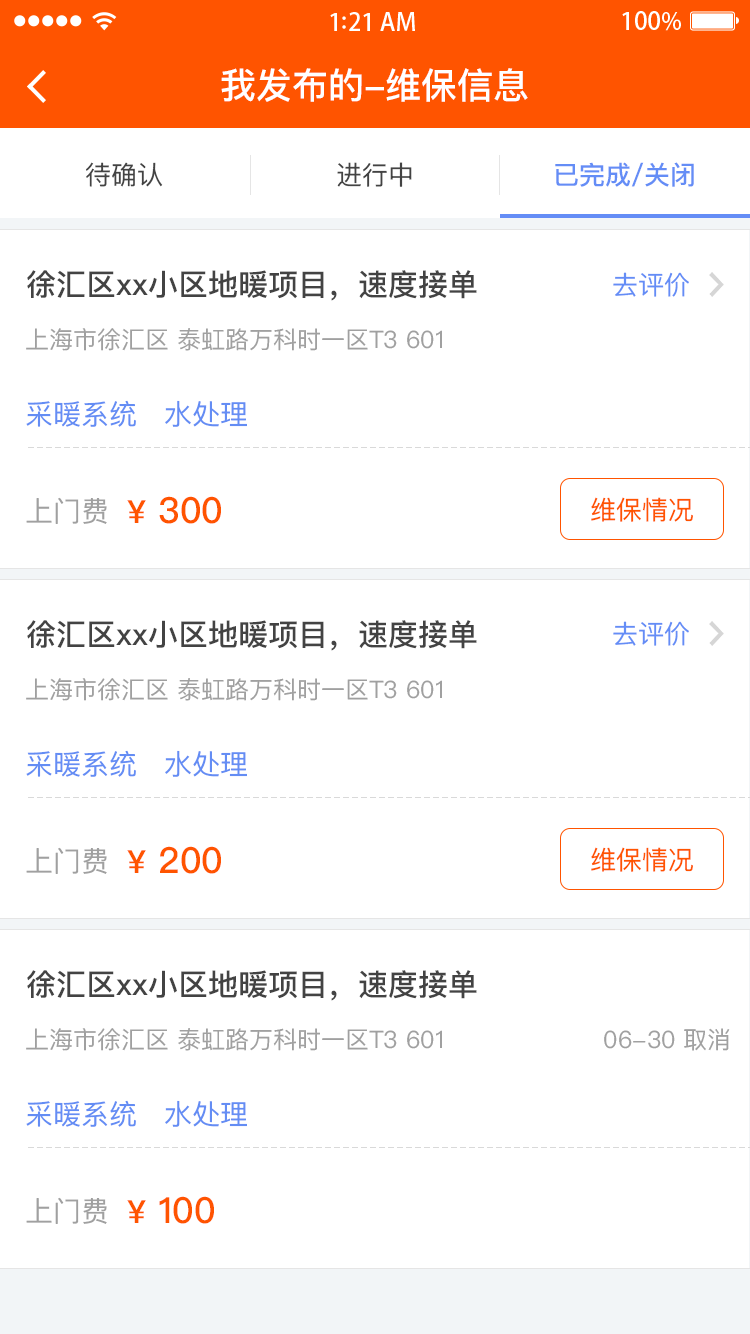
<style>
.page{position:relative;width:750px;height:1334px;background:#ffffff}
.page>*{position:absolute;margin:0}
.t1{font:36px "PingFangSC-Medium";color:#ffffff}
.t2{font:26px "PingFangSC-Regular";color:#434343}
.t3{font:26px "PingFangSC-Medium";color:#648df6}
.t4{font:30px "PingFangSC-Medium";color:#434343}
.t5{font:26px "PingFangSC-Regular";color:#648df6}
.t6{font:24px "PingFangSC-Regular";color:#a0a0a0}
.t7{font:28px "PingFangSC-Regular";color:#648df4}
.t8{font:28px "PingFangSC-Regular";color:#a0a0a0}
.t9{font:36px "PingFangSC-Medium";color:#ff5400}
.t10{font:32px "PingFangSC-Medium";color:#ff5400}
.t11{font:26px "PingFangSC-Regular";color:#ff5400}
</style>
<div class="page">
<p class="t1" style="left:221px;top:68px;width:307px;height:34px">我发布的-维保信息</p>
<p class="t2" style="left:86px;top:162px;width:77px;height:25px">待确认</p>
<p class="t2" style="left:337px;top:162px;width:75px;height:25px">进行中</p>
<p class="t3" style="left:555px;top:162px;width:139px;height:25px">已完成/关闭</p>
<p class="t4" style="left:27px;top:270px;width:450px;height:31px">徐汇区xx小区地暖项目，速度接单</p>
<p class="t5" style="left:613px;top:272px;width:76px;height:25px">去评价</p>
<p class="t6" style="left:26px;top:328px;width:416px;height:23px">上海市徐汇区 泰虹路万科时一区T3 601</p>
<p class="t7" style="left:26px;top:400px;width:110px;height:27px">采暖系统</p>
<p class="t7" style="left:165px;top:400px;width:82px;height:27px">水处理</p>
<p class="t8" style="left:26px;top:497px;width:81px;height:27px">上门费</p>
<p class="t9" style="left:127px;top:496px;width:94px;height:28px"><span class="t10">¥</span> 300</p>
<p class="t11" style="left:591px;top:497px;width:102px;height:25px">维保情况</p>
<p class="t4" style="left:27px;top:620px;width:450px;height:31px">徐汇区xx小区地暖项目，速度接单</p>
<p class="t5" style="left:613px;top:621px;width:76px;height:25px">去评价</p>
<p class="t6" style="left:26px;top:678px;width:416px;height:23px">上海市徐汇区 泰虹路万科时一区T3 601</p>
<p class="t7" style="left:26px;top:750px;width:110px;height:27px">采暖系统</p>
<p class="t7" style="left:165px;top:750px;width:82px;height:27px">水处理</p>
<p class="t9" style="left:127px;top:846px;width:94px;height:28px"><span class="t10">¥</span> 200</p>
<p class="t8" style="left:26px;top:847px;width:81px;height:27px">上门费</p>
<p class="t11" style="left:591px;top:847px;width:102px;height:25px">维保情况</p>
<p class="t4" style="left:27px;top:970px;width:450px;height:31px">徐汇区xx小区地暖项目，速度接单</p>
<p class="t6" style="left:26px;top:1028px;width:416px;height:23px">上海市徐汇区 泰虹路万科时一区T3 601</p>
<p class="t6" style="left:604px;top:1028px;width:126px;height:23px">06-30 取消</p>
<p class="t7" style="left:26px;top:1100px;width:110px;height:27px">采暖系统</p>
<p class="t7" style="left:165px;top:1100px;width:82px;height:27px">水处理</p>
<p class="t8" style="left:26px;top:1197px;width:81px;height:27px">上门费</p>
<p class="t9" style="left:127px;top:1196px;width:87px;height:28px"><span class="t10">¥</span> 100</p>
</div>
